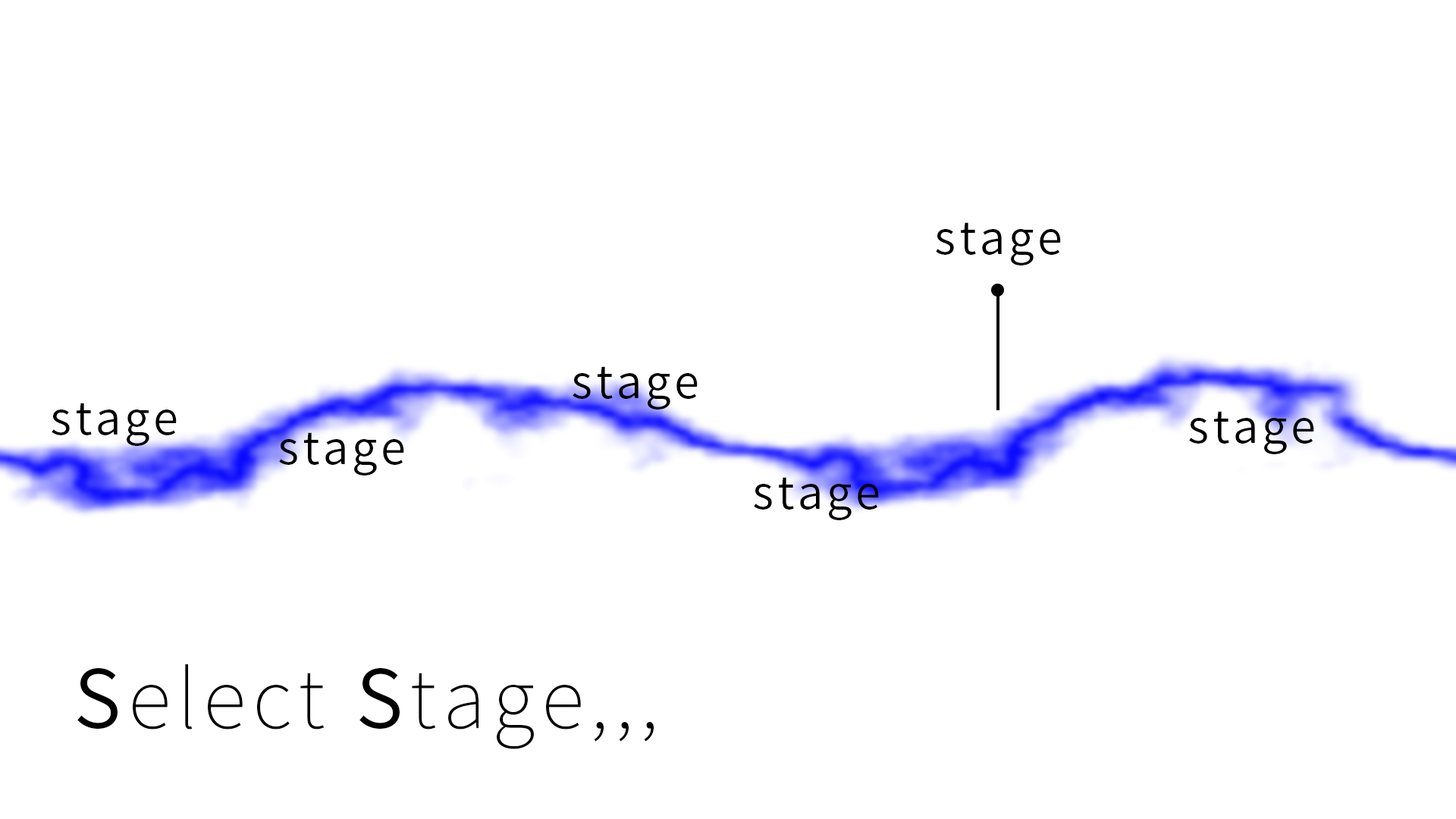
<style>
.page{position:relative;width:1456px;height:819px;background:#ffffff}
.page>*{position:absolute;margin:0}
.t1{font:45.5px "SourceHanSansJP-Normal";letter-spacing:0.08em;color:#000000}
.t2{font:80.4px "SourceHanSansJP-ExtraLight";letter-spacing:0.08em;color:#000000}
.t3{font:80.4px "SourceHanSansJP-Normal";letter-spacing:0.08em;color:#000000}
</style>
<div class="page">
<p class="t1" style="left:936px;top:222px;width:125px;height:43px">stage</p>
<p class="t1" style="left:573px;top:366px;width:125px;height:43px">stage</p>
<p class="t1" style="left:52px;top:403px;width:125px;height:43px">stage</p>
<p class="t1" style="left:1189px;top:411px;width:125px;height:43px">stage</p>
<p class="t1" style="left:279px;top:432px;width:125px;height:43px">stage</p>
<p class="t1" style="left:754px;top:477px;width:125px;height:43px">stage</p>
<p class="t2" style="left:77px;top:664px;width:577px;height:85px"><span class="t3">S</span>elect <span class="t3">S</span>tage,,,</p>
</div>
